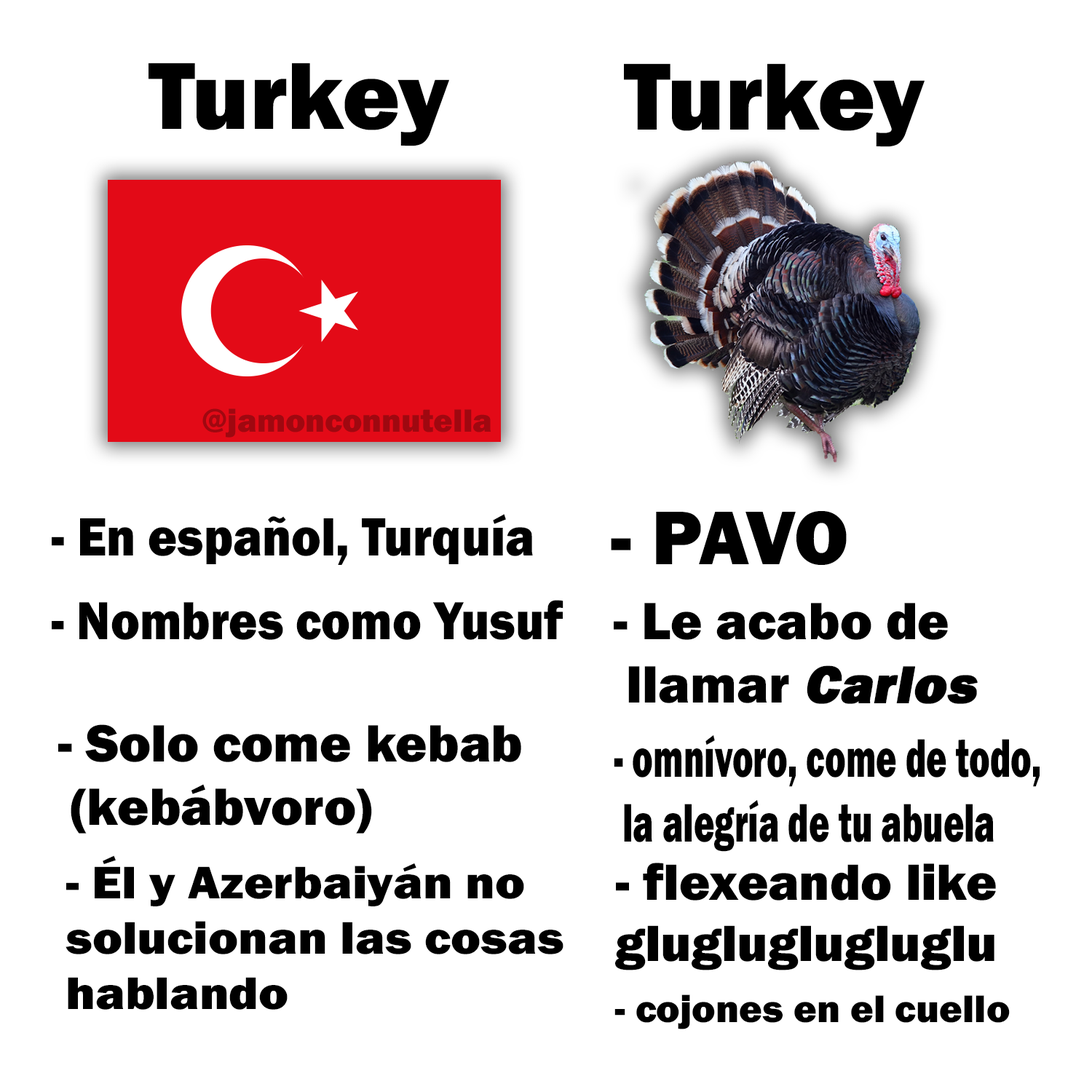
<style>
.page{position:relative;width:1092px;height:1092px;background:#ffffff}
.page>*{position:absolute;margin:0}
.t1{font:98.6px "FranklinGothic-Heavy";color:#000000}
.t2{font:33.4px "FranklinGothic-Heavy";color:#9f0810}
.t3{font:55.6px "FranklinGothic-Heavy";color:#000000;scale:0.9 1}
.t4{font:78.6px "FranklinGothic-Heavy";color:#000000}
.t5{font:55.5px "FranklinGothic-Heavy";color:#000000;scale:0.88 1}
.t6{font:54.3px "FranklinGothic-Heavy";color:#000000}
.t7{font:54.3px "FranklinGothic-Heavy";color:#000000;font-weight:bold;font-style:italic}
.t8{font:56.2px "FranklinGothic-Heavy";color:#000000;scale:0.63 1}
.t9{font:47.2px "FranklinGothic-Heavy";color:#000000;scale:1.07 1}
.t10{font:52.7px "FranklinGothic-Heavy";color:#000000}
.t11{font:39.9px "FranklinGothic-Heavy";color:#000000}
</style>
<div class="page">
<p class="t1" style="left:149px;top:63px;width:300px;height:83px">Turkey</p>
<p class="t1" style="left:624px;top:63px;width:301px;height:84px">Turkey</p>
<p class="t2" style="left:202px;top:408px;width:289px;height:30px">@jamonconnutella</p>
<p class="t3" style="left:52px;top:514px;width:481px;height:51px">- En español, Turquía</p>
<p class="t4" style="left:611px;top:511px;width:236px;height:54px">- PAVO</p>
<p class="t5" style="left:52px;top:600px;width:511px;height:40px">- Nombres como Yusuf</p>
<p class="t6" style="left:614px;top:603px;width:364px;height:101px">- Le acabo de<br> llamar <span class="t7">Carlos</span></p>
<p class="t6" style="left:58px;top:724px;width:463px;height:110px">- Solo come kebab<br> (kebábvoro)</p>
<p class="t8" style="left:614px;top:735px;width:426px;height:117px">- omnívoro, come de todo,<br> la alegría de tu abuela</p>
<p class="t9" style="left:66px;top:855px;width:497px;height:155px">- Él y Azerbaiyán no<br>solucionan las cosas<br>hablando</p>
<p class="t10" style="left:615px;top:863px;width:381px;height:107px">- flexeando like<br>glugluglugluglu</p>
<p class="t11" style="left:614px;top:994px;width:396px;height:35px">- cojones en el cuello</p>
</div>
